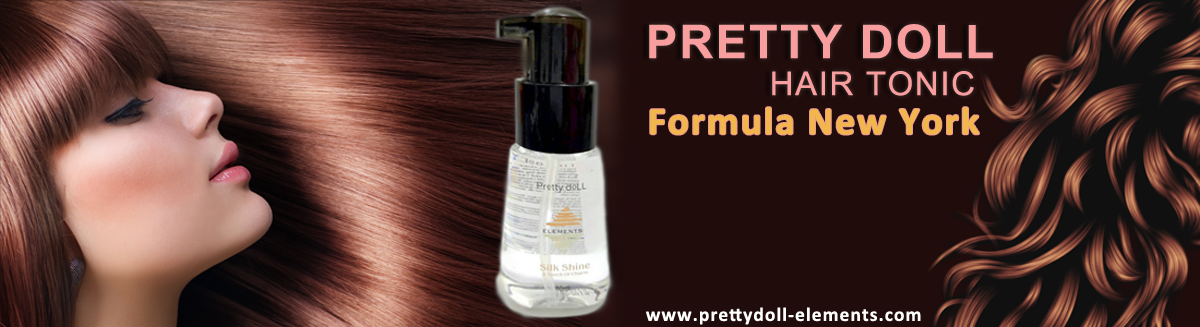
<style>
.page{position:relative;width:1200px;height:327px;background:#200c0b}
.page>*{position:absolute;margin:0}
.t1{font:46.7px "Arial-BoldMT";letter-spacing:0.05em;color:#f99e9e}
.t2{font:32.9px "ArialMT";letter-spacing:0.05em;color:#f99e9e}
.t3{font:39.2px "Calibri-Bold";letter-spacing:0.05em;color:#f2b74a}
.t4{font:19.6px "Calibri-Bold";letter-spacing:0.05em;color:#ffffff}
</style>
<div class="page">
<p class="t1" style="left:649px;top:24px;width:344px;height:35px">PRETTY DOLL</p>
<p class="t2" style="left:772px;top:71px;width:202px;height:25px">HAIR TONIC</p>
<p class="t3" style="left:650px;top:107px;width:329px;height:28px">Formula New York</p>
<p class="t4" style="left:646px;top:307px;width:275px;height:18px">www.prettydoll-elements.com</p>
</div>
